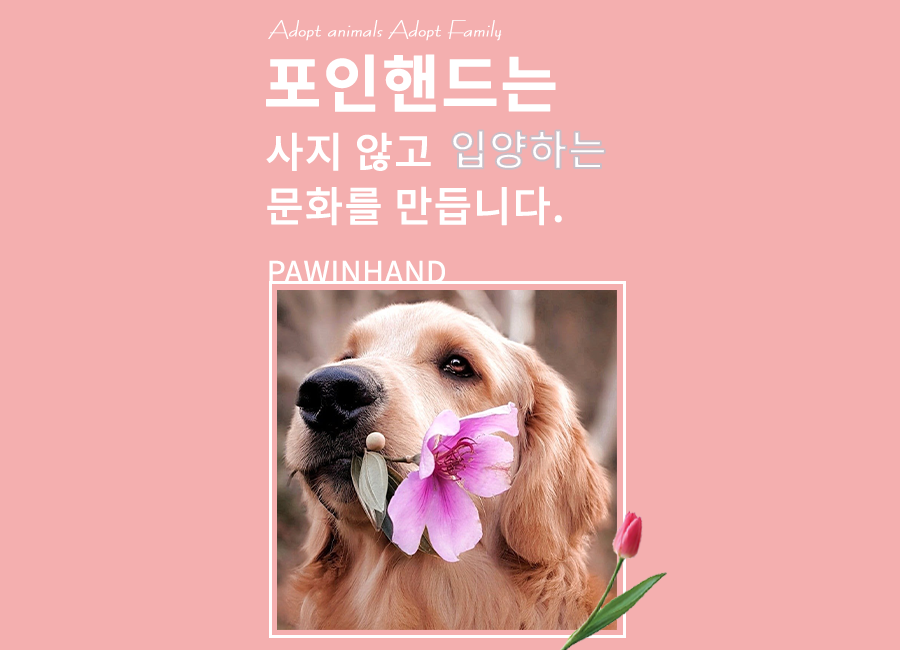
<style>
.page{position:relative;width:900px;height:650px;background:#f4afaf}
.page>*{position:absolute;margin:0}
.t1{font:20.8px "BernhardFashion-BT";color:#ffffff;font-weight:bold;font-style:italic}
.t2{font:62.5px "NotoSansKR-Bold";color:#ffffff;font-weight:bold}
.t3{font:41.7px/54.2px "NotoSansKR-Medium";color:#ffffff;font-weight:bold}
.t4{font:41.7px "NotoSansKR-Medium";color:#f2eef0;font-weight:bold}
.t5{font:29.8px "NotoSansKR-Regular";color:#ffffff;font-weight:bold}
</style>
<div class="page">
<p class="t1" style="left:268px;top:20px;width:234px;height:21px">Adopt animals Adopt Family</p>
<p class="t2" style="left:266px;top:54px;width:290px;height:58px">포인핸드는</p>
<p class="t3" style="left:266px;top:132px;width:296px;height:94px">사지 않고<br>문화를 만듭니다.</p>
<p class="t4" style="left:452px;top:130px;width:153px;height:39px">입양하는</p>
<p class="t5" style="left:269px;top:260px;width:176px;height:23px">PAWINHAND</p>
</div>
